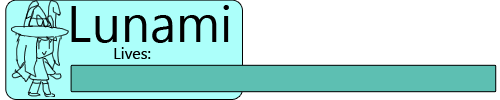
<style>
.page{position:relative;width:500px;height:100px;background:#ffffff}
.page>*{position:absolute;margin:0}
.t1{font:51.5px "Gadugi";color:#000000}
.t2{font:16px "Gadugi";color:#000000}
</style>
<div class="page">
<p class="t1" style="left:71px;top:5px;width:158px;height:38px">Lunami</p>
<p class="t2" style="left:114px;top:47px;width:37px;height:12px">Lives:</p>
</div>
